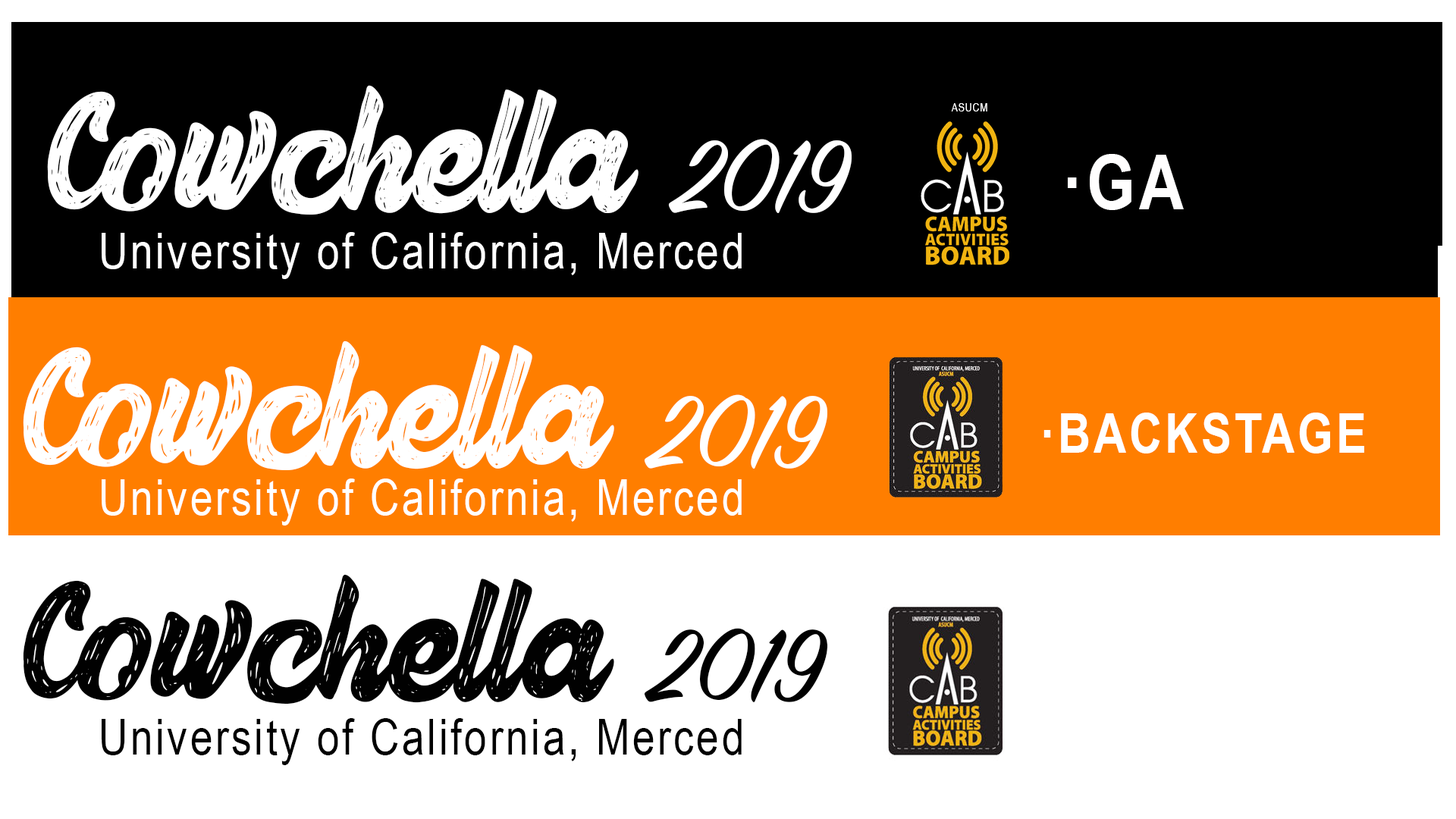
<style>
.page{position:relative;width:1456px;height:819px;background:#ffffff}
.page>*{position:absolute;margin:0}
.t1{font:151.7px "HereyScriptFreeVersion";color:#ffffff}
.t2{font:113.7px "SignPainter-HouseScript";color:#ffffff}
.t3{font:11.4px "ArialNarrow";letter-spacing:0.055em;color:#ffffff}
.t4{font:75.8px "ArialNarrow-Bold";letter-spacing:0.055em;color:#fffefe}
.t5{font:49.3px "ArialNarrow";letter-spacing:0.055em;color:#ffffff}
.t6{font:55.4px "ArialNarrow-Bold";letter-spacing:0.055em;color:#ffffff}
.t7{font:151.7px "HereyScriptFreeVersion";color:#010101}
.t8{font:113.7px "SignPainter-HouseScript";color:#010101}
.t9{font:49.3px "ArialNarrow";letter-spacing:0.055em;color:#000000}
</style>
<div class="page">
<p class="t1" style="left:47px;top:85px;width:805px;height:130px">Cowchella <span class="t2">2019</span></p>
<p class="t3" style="left:951px;top:103px;width:36px;height:8px">ASUCM</p>
<p class="t4" style="left:1068px;top:154px;width:116px;height:56px">·GA</p>
<p class="t5" style="left:102px;top:232px;width:640px;height:47px">University of California, Merced</p>
<p class="t1" style="left:23px;top:340px;width:804px;height:130px">Cowchella <span class="t2">2019</span></p>
<p class="t6" style="left:1043px;top:413px;width:321px;height:40px">·BACKSTAGE</p>
<p class="t5" style="left:102px;top:479px;width:640px;height:47px">University of California, Merced</p>
<p class="t7" style="left:23px;top:574px;width:804px;height:130px">Cowchella <span class="t8">2019</span></p>
<p class="t9" style="left:102px;top:718px;width:640px;height:47px">University of California, Merced</p>
</div>
